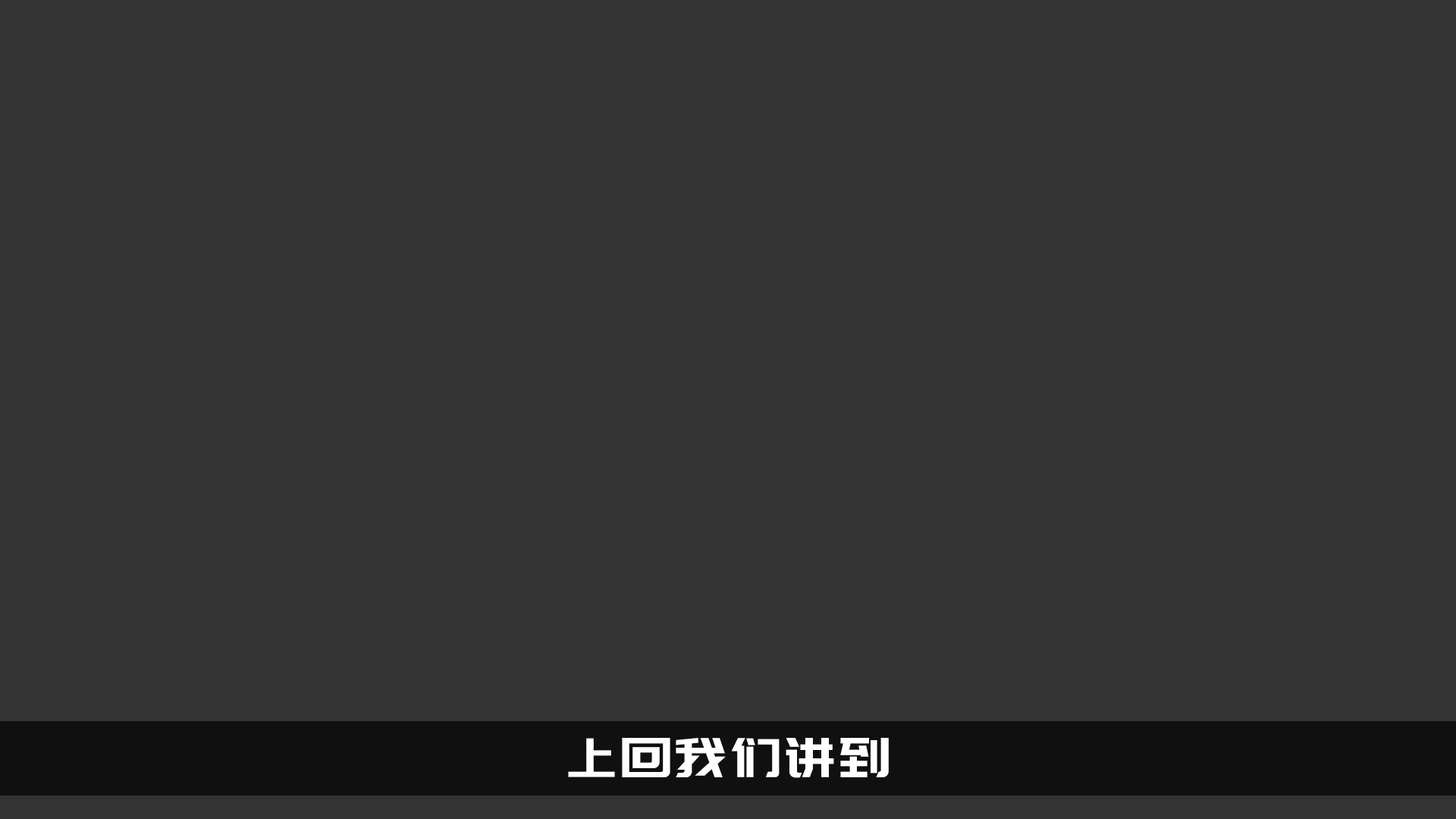
<style>
.page{position:relative;width:1456px;height:819px;background:#333333}
.page>*{position:absolute;margin:0}
.t1{font:54.6px "PangMenZhengDao-3";color:#ffffff}
</style>
<div class="page">
<p class="t1" style="left:568px;top:738px;width:321px;height:40px">上回我们讲到</p>
</div>
